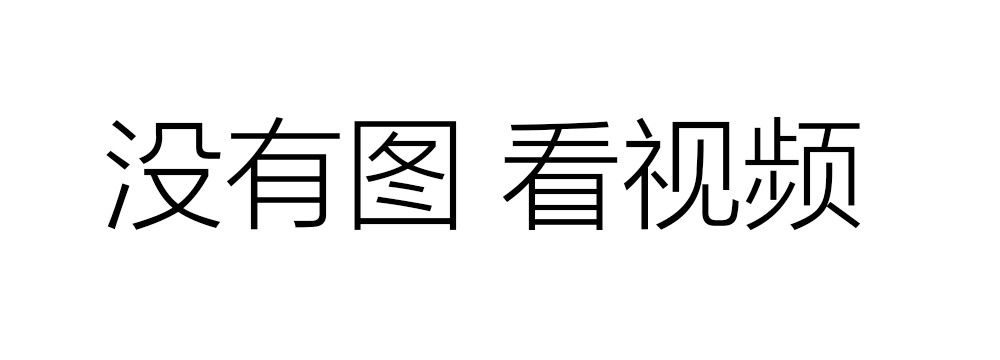
<style>
.page{position:relative;width:1000px;height:360px;background:#ffffff}
.page>*{position:absolute;margin:0}
.t1{font:121px "FZLTXHK--GBK1-0";color:#000000}
</style>
<div class="page">
<p class="t1" style="left:106px;top:116px;width:755px;height:115px">没有图 看视频</p>
</div>
